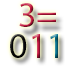
<style>
.page{position:relative;width:72px;height:72px;background:#ffffff}
.page>*{position:absolute;margin:0}
.t1{font:36px "MyriadPro-Regular"}
</style>
<div class="page">
<p class="t1" style="left:19px;top:3px;width:37px;height:24px">3=</p>
<p class="t1" style="left:10px;top:34px;width:48px;height:24px">011</p>
</div>
